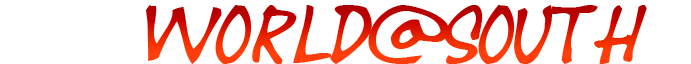
<style>
.page{position:relative;width:691px;height:64px;background:#ffffff}
.page>*{position:absolute;margin:0}
.t1{font:60px "Yearsupplyoffairycakes";color:#ff0000}
</style>
<div class="page">
<p class="t1" style="left:146px;top:5px;width:501px;height:59px">World@South</p>
</div>
